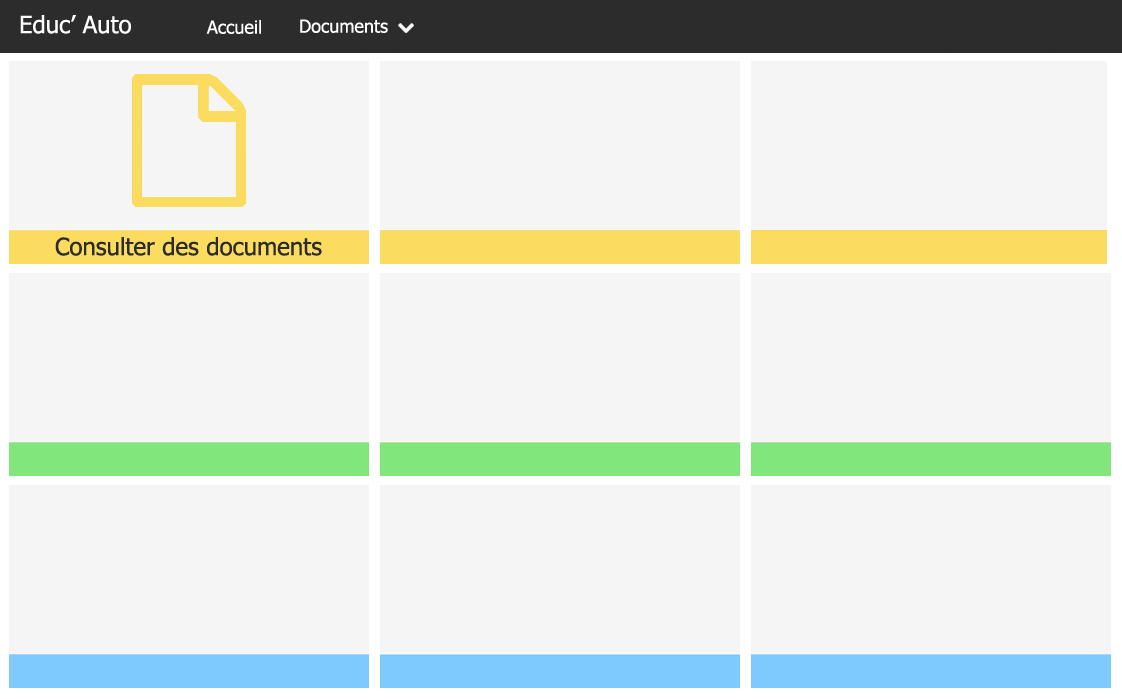
<style>
.page{position:relative;width:1122px;height:699px;background:#f5f5f5}
.page>*{position:absolute;margin:0}
.t1{font:24px "Tahoma";color:#ffffff}
.t2{font:18px "Tahoma";color:#ffffff}
.t3{font:24px "Tahoma";color:#2c2c2c}
</style>
<div class="page">
<p class="t1" style="left:20px;top:15px;width:111px;height:19px">Educ’ Auto</p>
<p class="t2" style="left:206px;top:20px;width:55px;height:14px">Accueil</p>
<p class="t2" style="left:300px;top:19px;width:88px;height:14px">Documents</p>
<p class="t3" style="left:55px;top:237px;width:267px;height:19px">Consulter des documents</p>
</div>
